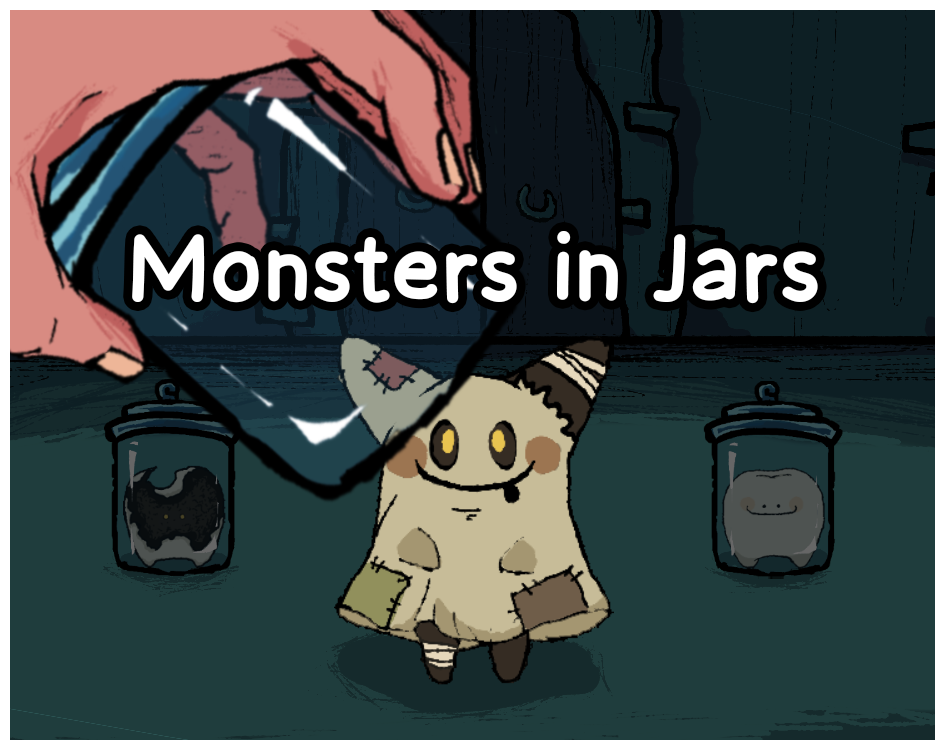
<style>
.page{position:relative;width:945px;height:750px;background:#1f3d3d}
.page>*{position:absolute;margin:0}
.t1{font:112px "MorningBreezeRegular";color:#ffffff}
</style>
<div class="page">
<p class="t1" style="left:132px;top:231px;width:686px;height:73px">Monsters in Jars</p>
</div>
